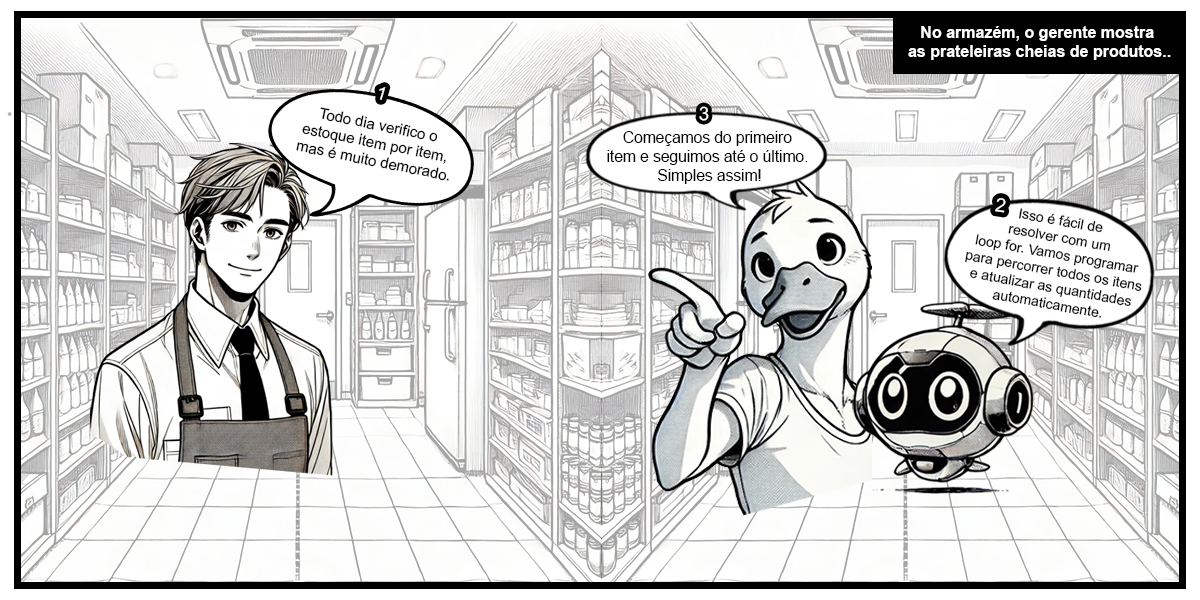
<style>
.page{position:relative;width:1200px;height:600px;background:#ffffff}
.page>*{position:absolute;margin:0}
.t1{font:16px "Arial-BoldMT";color:#ffffff}
.t2{font:18.1px "ArialMT";color:#ffffff}
.t3{font:15px "ArialMT";color:#000000}
.t4{font:18.8px "ArialMT";color:#ffffff}
.t5{font:15.5px "ArialMT";color:#000000}
.t6{font:14px "ArialMT";color:#000000}
</style>
<div class="page">
<p class="t1" style="left:908px;top:26px;width:263px;height:34px;text-align:center">No armazém, o gerente mostra <br>as prateleiras cheias de produtos..</p>
<p class="t2" style="left:379px;top:87px;width:7px;height:13px;rotate:16deg">1</p>
<p class="t3" style="left:296px;top:107px;width:153px;height:74px;text-align:center;rotate:11deg">Todo dia verifico o <br>estoque item por item, <br>mas é muito demorado.</p>
<p class="t4" style="left:699px;top:106px;width:10px;height:15px;rotate:2deg">3</p>
<p class="t5" style="left:607px;top:131px;width:201px;height:53px;text-align:center">Começamos do primeiro <br>item e seguimos até o último. <br>Simples assim!</p>
<p class="t4" style="left:995px;top:198px;width:11px;height:15px;rotate:8deg">2</p>
<p class="t6" style="left:965px;top:208px;width:177px;height:110px;text-align:center;rotate:10deg">Isso é fácil de <br>resolver com um<br> loop for. Vamos programar <br>para percorrer todos os itens<br> e atualizar as quantidades <br>automaticamente.</p>
</div>
